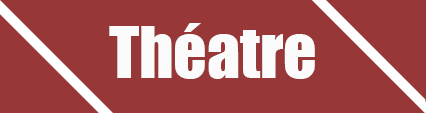
<style>
.page{position:relative;width:426px;height:113px;background:#983737}
.page>*{position:absolute;margin:0}
.t1{font:65.6px "Impact";color:#fbfbfb}
</style>
<div class="page">
<p class="t1" style="left:109px;top:23px;width:206px;height:56px">Théatre</p>
</div>
